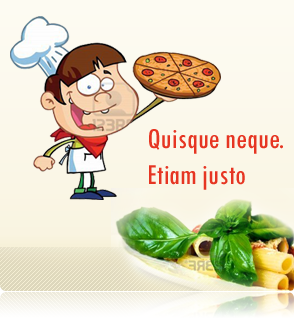
<style>
.page{position:relative;width:294px;height:319px}
.page>*{position:absolute;margin:0}
.t1{font:30px "TwCenMT-Condensed";color:#e63522}
</style>
<div class="page">
<p class="t1" style="left:149px;top:129px;width:134px;height:61px">Quisque neque.<br>Etiam justo</p>
</div>
